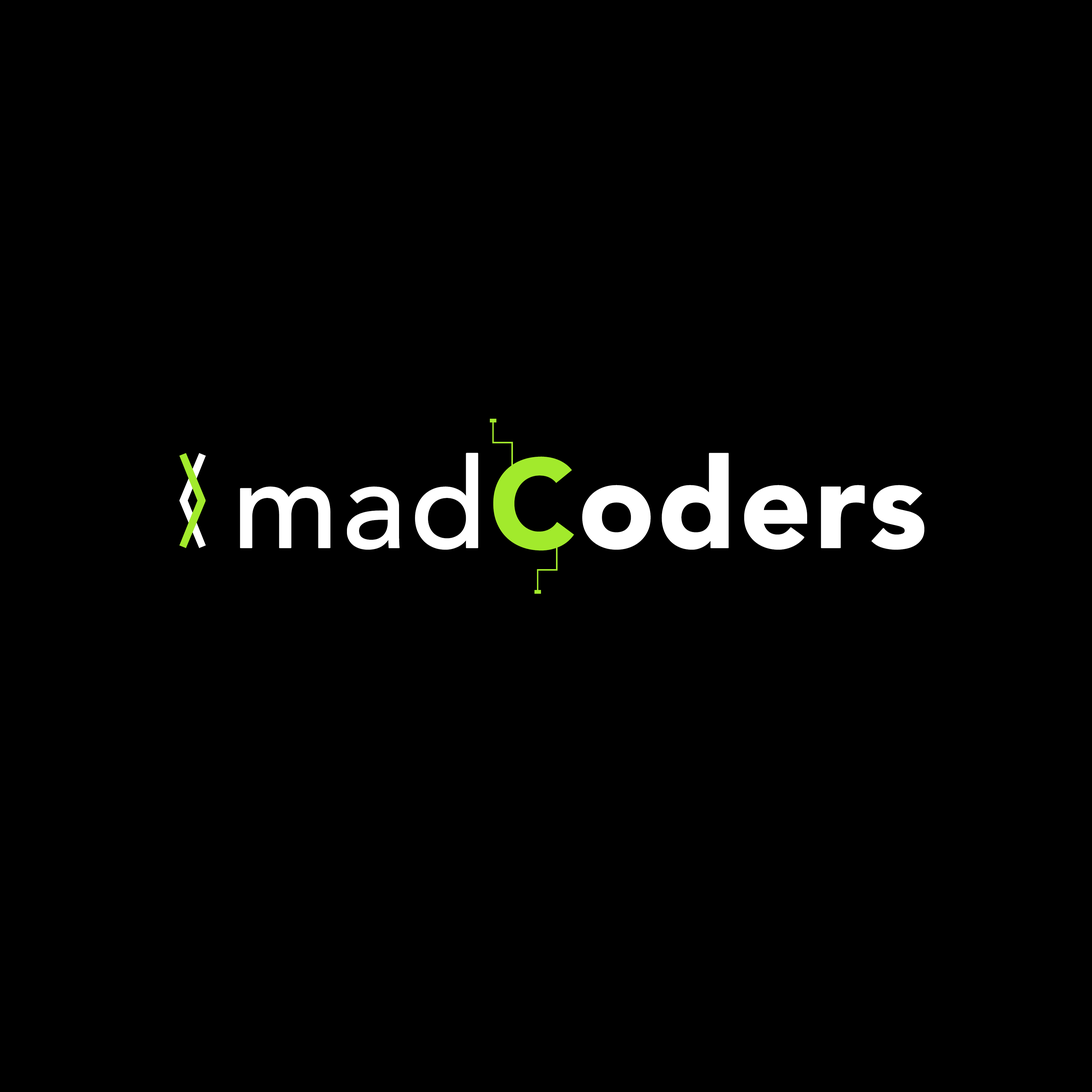
<style>
.page{position:relative;width:1092px;height:1092px;background:#000000}
.page>*{position:absolute;margin:0}
.t1{font:124.8px "Avenir-Black";color:#ffffff;font-weight:bold}
.t2{font:124.8px "Avenir-Medium";color:#ffffff;font-weight:bold}
.t3{font:124.8px "Avenir-Black";color:#a2ea2c;font-weight:bold}
</style>
<div class="page">
<p class="t1" style="left:240px;top:453px;width:684px;height:98px"><span class="t2">mad</span><span class="t3">C</span>oders</p>
</div>
